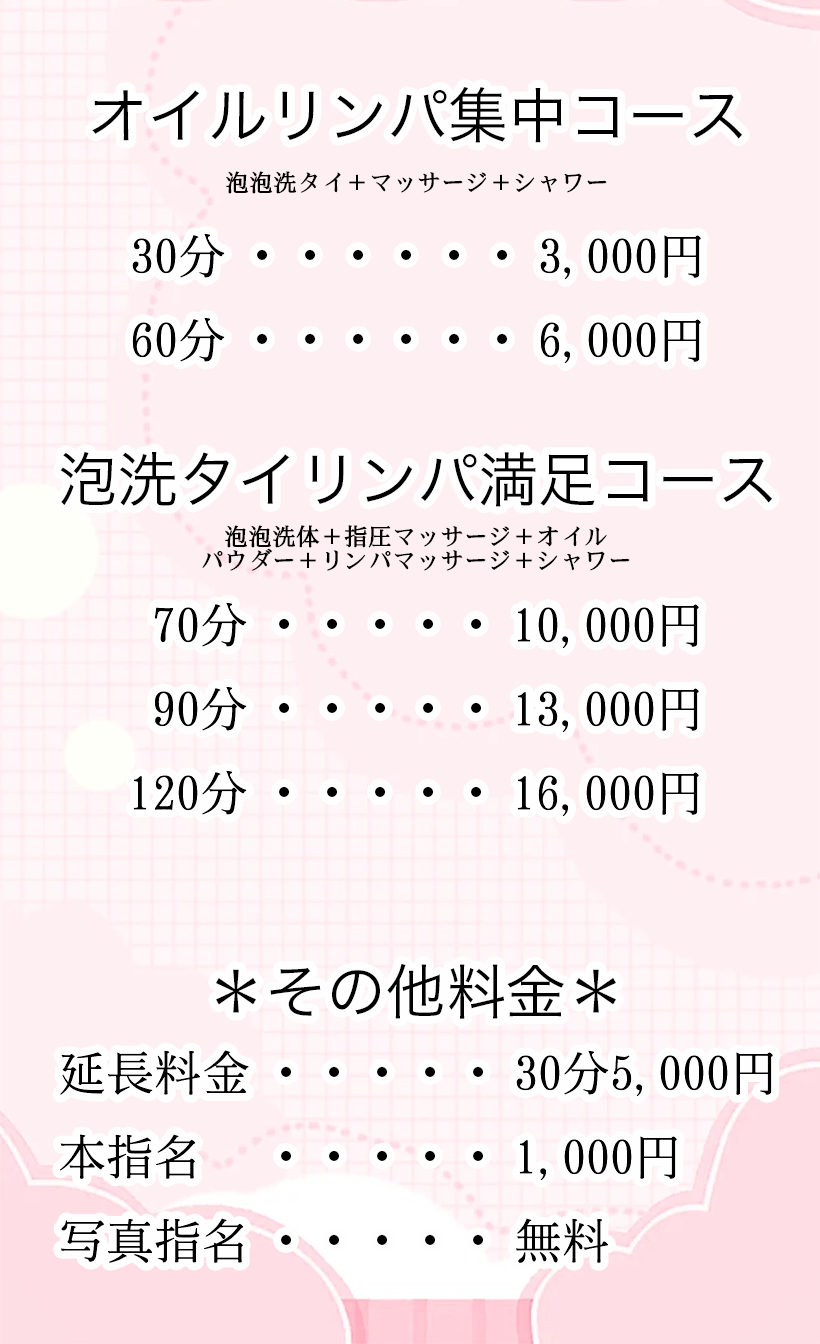
<style>
.page{position:relative;width:820px;height:1344px;background:#fef0f2}
.page>*{position:absolute;margin:0}
.t1{font:60px "HiraKakuPro-W3";color:#020202}
.t2{font:24px "SimSong-Bold";color:#000000}
.t3{font:48px "SimSong-Regular";color:#000000}
.t4{font:48px "KozGoPr6N-Regular";color:#000000}
.t5{font:60px "HiraKakuPro-W3";color:#000000}
.t6{font:24px/24px "SimSong-Bold";color:#000000}
</style>
<div class="page">
<p class="t1" style="left:92px;top:87px;width:650px;height:56px">オイルリンパ集中コース</p>
<p class="t2" style="left:226px;top:171px;width:381px;height:23px">泡泡洗タイ＋マッサージ＋シャワー</p>
<p class="t3" style="left:132px;top:233px;width:569px;height:130px">30分 <span class="t4">・・・・・・</span> 3,000円<br>60分 <span class="t4">・・・・・・</span> 6,000円</p>
<p class="t5" style="left:60px;top:452px;width:712px;height:55px">泡洗タイリンパ満足コース</p>
<p class="t6" style="left:202px;top:525px;width:428px;height:46px;text-align:center">泡泡洗体＋指圧マッサージ＋オイル<br>パウダー＋リンパマッサージ＋シャワー</p>
<p class="t3" style="left:133px;top:602px;width:566px;height:214px">70分 <span class="t4">・・・・・</span> 10,000円<br> 90分 <span class="t4">・・・・・</span> 13,000円<br>120分 <span class="t4">・・・・・</span> 16,000円</p>
<p class="t5" style="left:216px;top:963px;width:400px;height:56px">＊その他料金＊</p>
<p class="t3" style="left:60px;top:1050px;width:713px;height:213px">延長料金 <span class="t4">・・・・・</span> 30分5,000円<br> 本指名   <span class="t4">・・・・・</span> 1,000円<br> 写真指名 <span class="t4">・・・・・</span> 無料</p>
</div>
